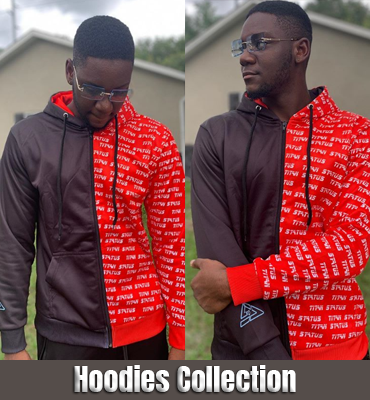
<style>
.page{position:relative;width:370px;height:400px}
.page>*{position:absolute;margin:0}
.t1{font:30px "Anton-Regular";color:#fbfbfb}
</style>
<div class="page">
<p class="t1" style="left:74px;top:365px;width:222px;height:27px">Hoodies Collection</p>
</div>
